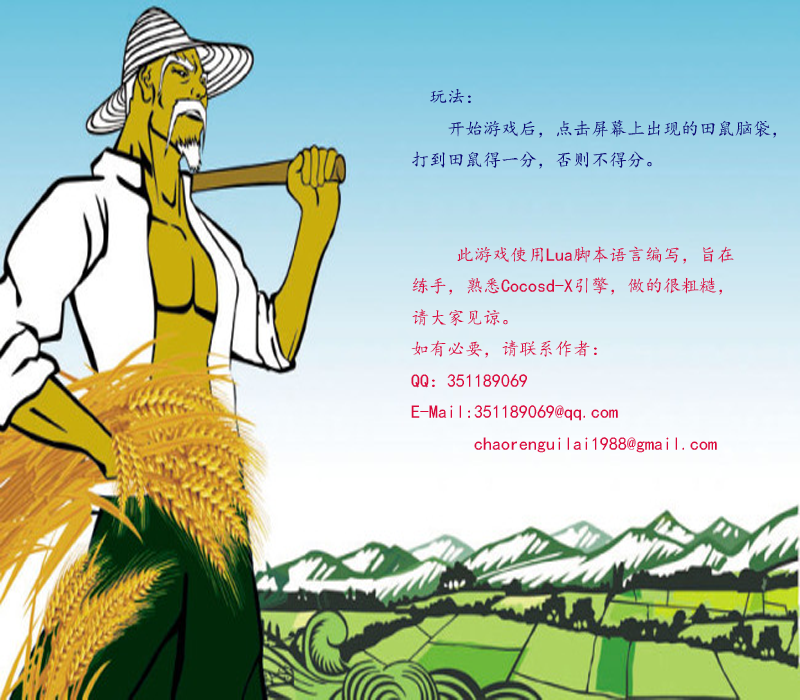
<style>
.page{position:relative;width:800px;height:700px}
.page>*{position:absolute;margin:0}
.t1{font:18px "¿¬Ìå";color:#da0a3b}
.t2{font:18px "¿¬Ìå";color:#0a0873}
</style>
<div class="page">
<p class="t1" style="left:411px;top:89px;width:365px;height:364px"><span class="t2">  玩法：<br>    开始游戏后，点击屏幕上出现的田鼠脑袋，<br>打到田鼠得一分，否则不得分。</span>  <br><br><br>     此游戏使用Lua脚本语言编写，旨在<br>练手，熟悉Cocosd-X引擎，做的很粗糙，<br>请大家见谅。<br>如有必要，请联系作者：<br>QQ：351189069<br>E-Mail:351189069@qq.com<br>       chaorenguilai1988@gmail.com</p>
</div>
